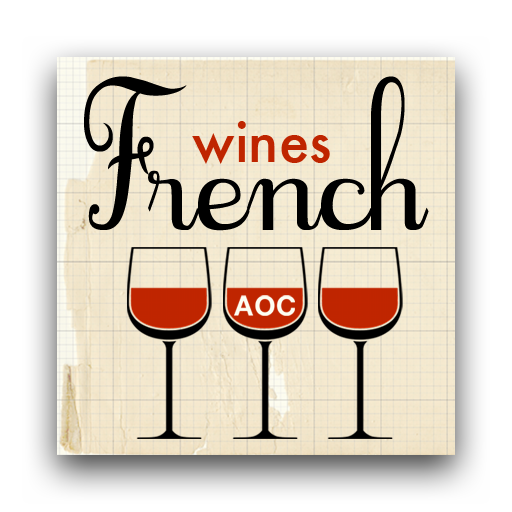
<style>
.page{position:relative;width:512px;height:512px}
.page>*{position:absolute;margin:0}
.t1{font:111px "Cursif-Regular";color:#000000}
.t2{font:55px "Futura-Medium";color:#c02500}
</style>
<div class="page">
<p class="t1" style="left:84px;top:76px;width:345px;height:155px">French</p>
<p class="t2" style="left:192px;top:121px;width:138px;height:43px">wines</p>
</div>
